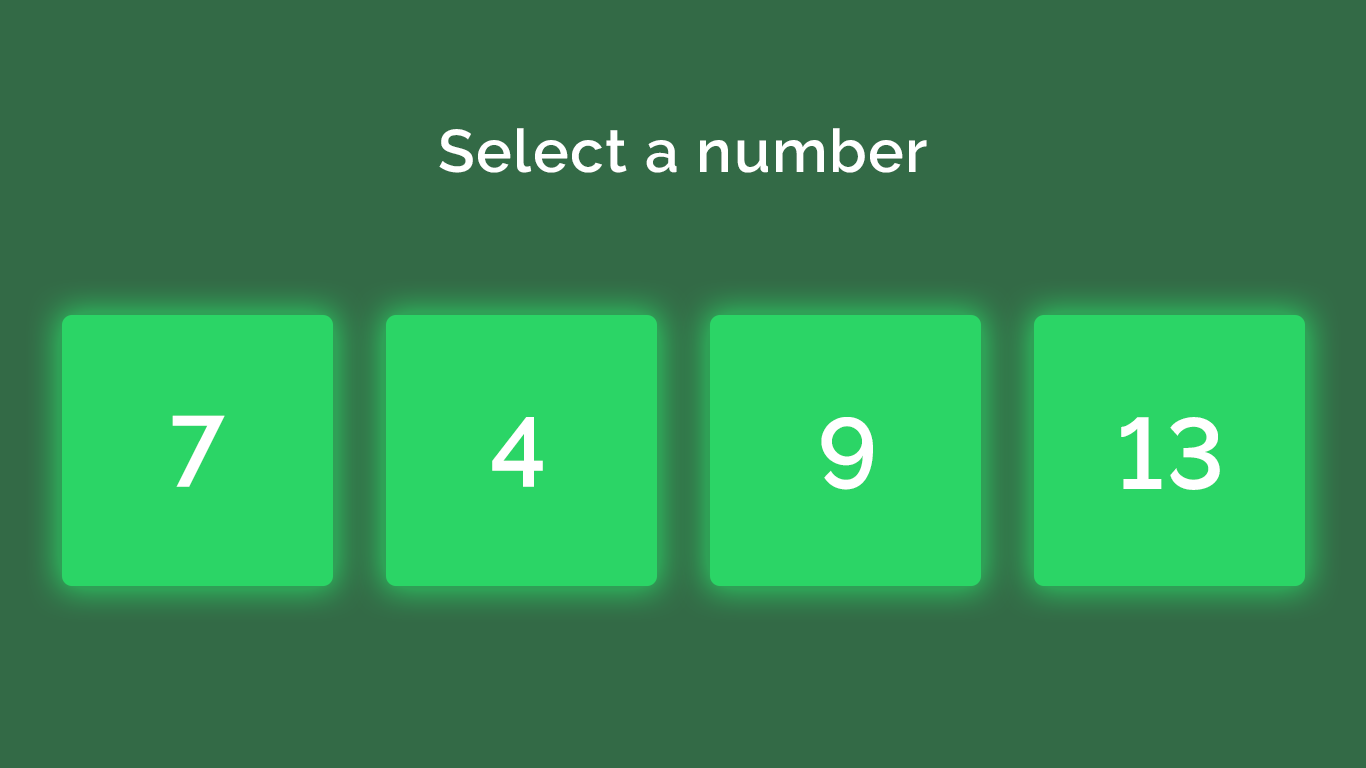
<style>
.page{position:relative;width:1366px;height:768px;background:#336a46}
.page>*{position:absolute;margin:0}
.t1{font:60px "Raleway-SemiBold";letter-spacing:0.025em;color:#ffffff}
.t2{font:100px "Raleway-SemiBold";letter-spacing:0.025em;color:#ffffff}
</style>
<div class="page">
<p class="t1" style="left:439px;top:128px;width:488px;height:45px">Select a number</p>
<p class="t2" style="left:172px;top:415px;width:53px;height:72px">7</p>
<p class="t2" style="left:492px;top:417px;width:51px;height:70px">4</p>
<p class="t2" style="left:821px;top:417px;width:52px;height:73px">9</p>
<p class="t2" style="left:1121px;top:417px;width:99px;height:73px">13</p>
</div>
